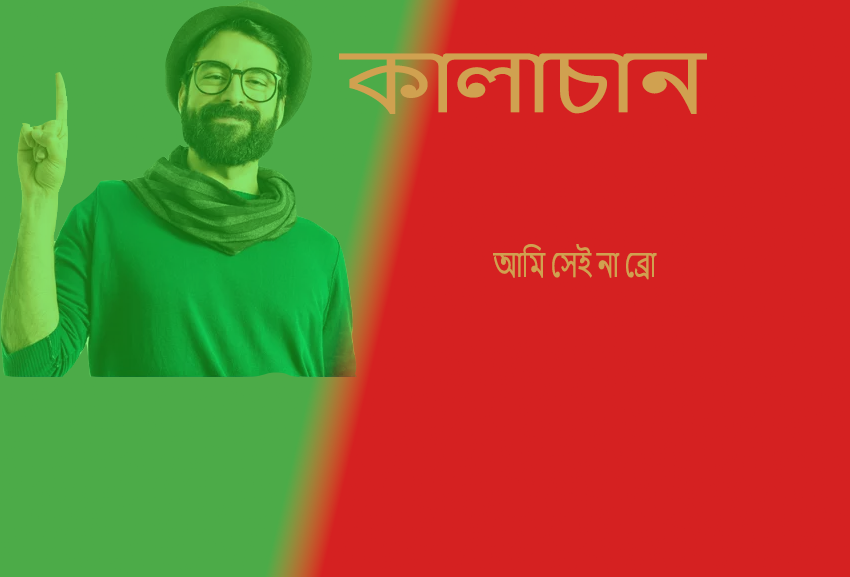
<style>
.page{position:relative;width:850px;height:577px;background:#d52121}
.page>*{position:absolute;margin:0}
.t1{font:80.5px "NirmalaUI";letter-spacing:-0.02em;color:#d0a150;scale:1.28 1}
.t2{font:32.9px "NirmalaUI";letter-spacing:-0.02em;color:#d0a150;scale:0.73 1}
</style>
<div class="page">
<p class="t1" style="left:339px;top:53px;width:368px;height:61px">কালাচান</p>
<p class="t2" style="left:493px;top:244px;width:164px;height:36px">আমি সেই না ব্রো</p>
</div>
